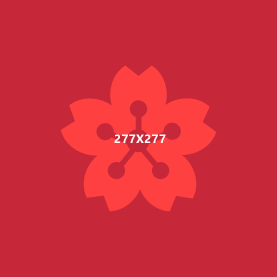
<style>
.page{position:relative;width:277px;height:277px;background:#c62839}
.page>*{position:absolute;margin:0}
.t1{font:12px "SegoeWP-Bold";letter-spacing:0.025em;color:#ffffff;text-transform:uppercase}
</style>
<div class="page">
<p class="t1" style="left:114px;top:134px;width:52px;height:9px">277x277</p>
</div>
